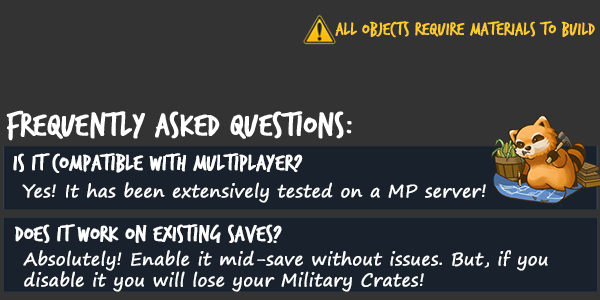
<style>
.page{position:relative;width:600px;height:300px;background:#333333}
.page>*{position:absolute;margin:0}
.t1{font:19.4px "TrashHand";color:#ffcc21;font-weight:bold}
.t2{font:34.5px "TrashHand";color:#ffffff;font-weight:bold}
.t3{font:23.9px "TrashHand";color:#ffffff;font-weight:bold}
.t4{font:17.3px "SegoePrint";color:#ffffff;font-weight:bold}
</style>
<div class="page">
<p class="t1" style="left:335px;top:21px;width:260px;height:17px">All OBJECTS REQUIRE MATERIALS TO BUILD</p>
<p class="t2" style="left:6px;top:110px;width:346px;height:31px">Frequently Asked Questions:</p>
<p class="t3" style="left:13px;top:153px;width:290px;height:20px">Is it compatible with Multiplayer?</p>
<p class="t4" style="left:22px;top:182px;width:464px;height:21px">Yes! It has been extensively tested on a MP server!</p>
<p class="t3" style="left:15px;top:224px;width:267px;height:19px">Does it work on existing saves?</p>
<p class="t4" style="left:23px;top:250px;width:525px;height:42px">Absolutely! Enable it mid-save without issues. But, if you <br>disable it you will lose your Military Crates!</p>
</div>
